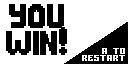
<style>
.page{position:relative;width:128px;height:64px;background:#ffffff}
.page>*{position:absolute;margin:0}
.t1{font:32.3px "Big-Apple-3PM";color:#010101}
.t2{font:16.9px "Gamer";letter-spacing:-0.02em;color:#ffffff}
</style>
<div class="page">
<p class="t1" style="left:6px;top:4px;width:61px;height:51px;text-align:center">YOU<br>WIN!</p>
<p class="t2" style="left:82px;top:48px;width:43px;height:13px;text-align:right">A TO<br>RESTART</p>
</div>
